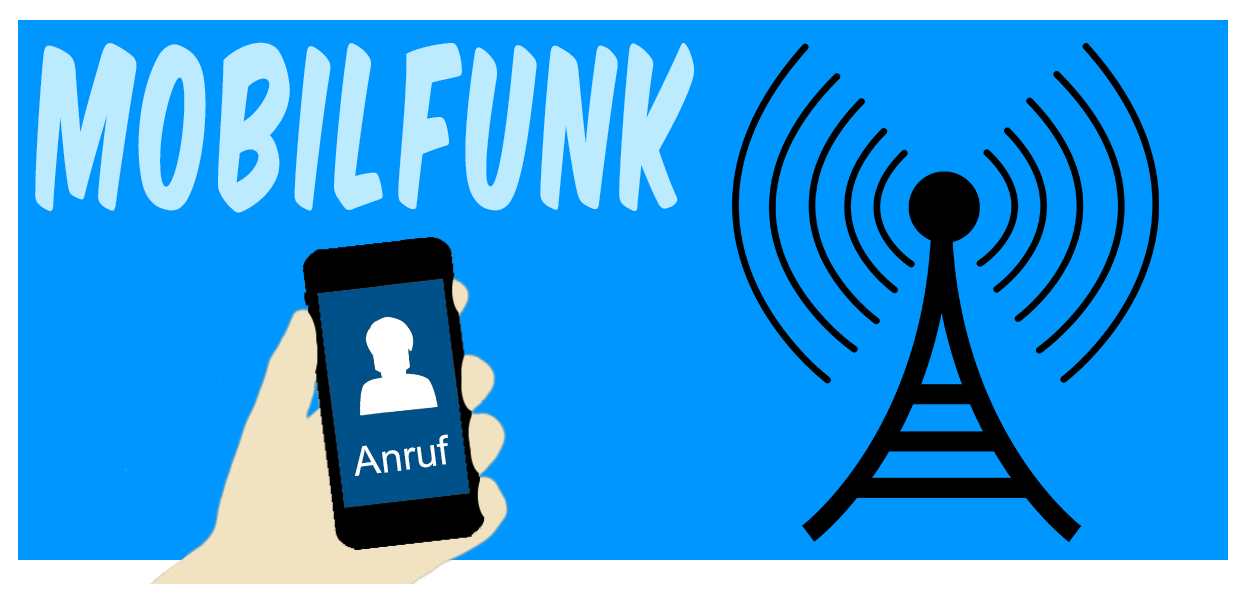
<style>
.page{position:relative;width:1240px;height:602px;background:#0096ff}
.page>*{position:absolute;margin:0}
.t1{font:187.5px "KomikaAxis";letter-spacing:0.1em;color:#bceaff;scale:0.53 1}
.t2{font:40px "ArialMT";color:#ffffff}
</style>
<div class="page">
<p class="t1" style="left:35px;top:42px;width:659px;height:171px">MOBILFUNK</p>
<p class="t2" style="left:355px;top:434px;width:93px;height:42px;rotate:-7deg">Anruf</p>
</div>
